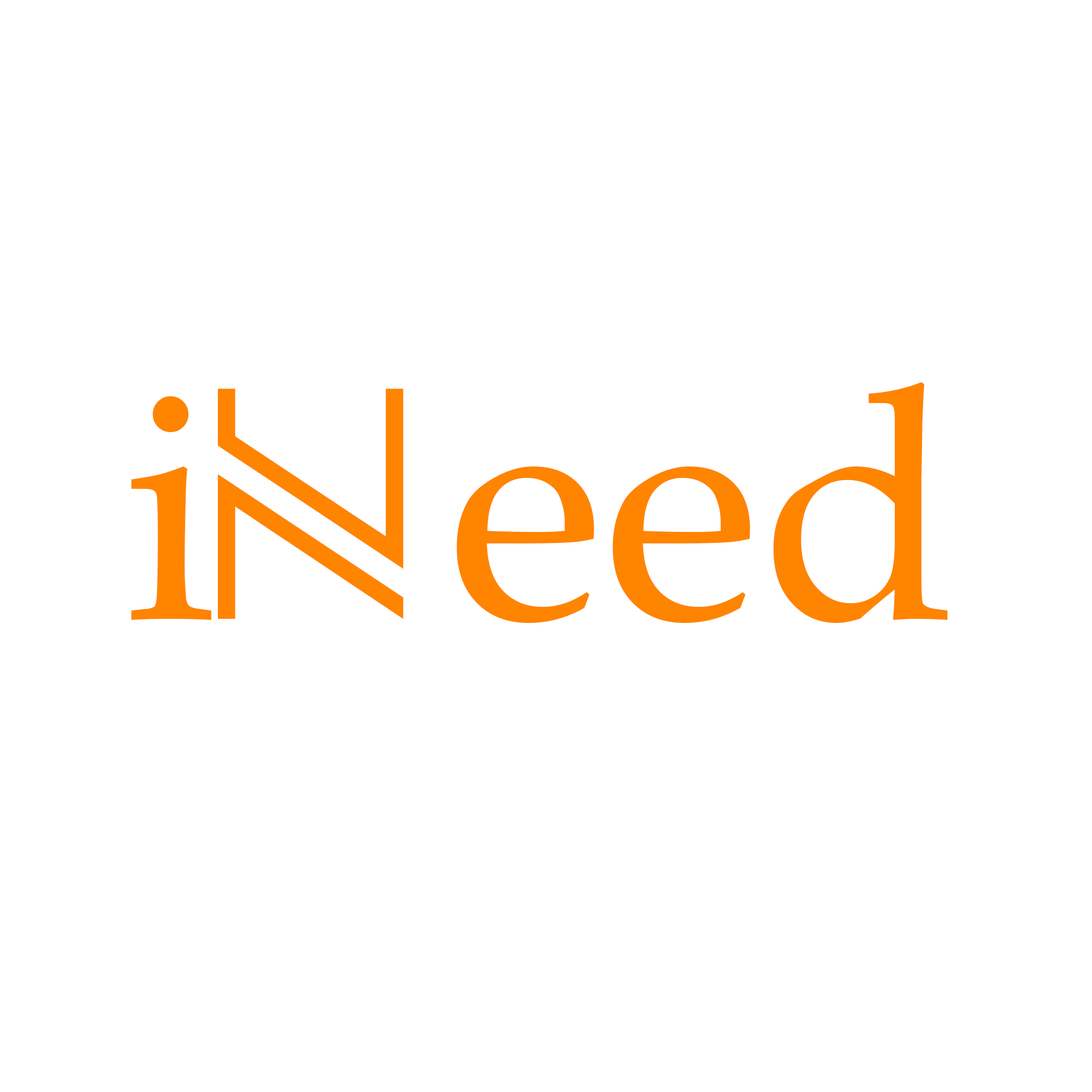
<style>
.page{position:relative;width:1092px;height:1092px;background:#ffffff}
.page>*{position:absolute;margin:0}
.t1{font:325px "BookAntiqua";color:#ff8400}
.t2{font:325px "NordicAlternative";color:#ff8400}
</style>
<div class="page">
<p class="t1" style="left:131px;top:382px;width:816px;height:241px">i<span class="t2">n</span>eed</p>
</div>
